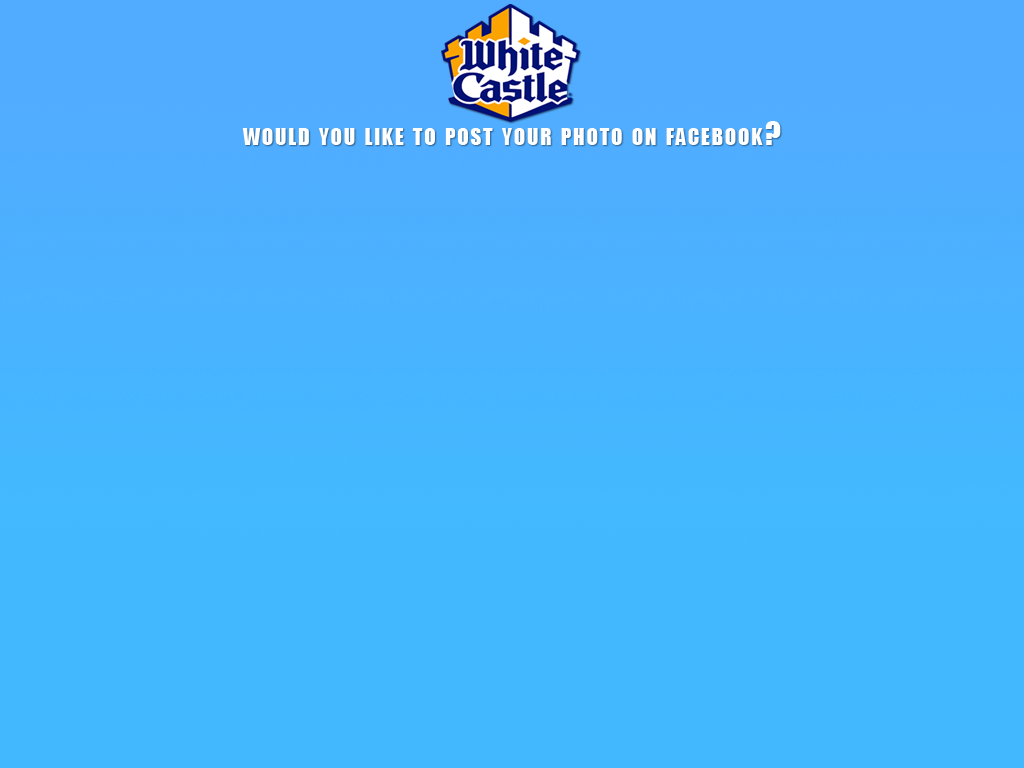
<style>
.page{position:relative;width:1024px;height:768px;background:#42b9ff}
.page>*{position:absolute;margin:0}
.t1{font:30px "Impact";letter-spacing:0.07em;color:#ffffff;font-variant:small-caps}
</style>
<div class="page">
<p class="t1" style="left:242px;top:121px;width:539px;height:24px">would you like to post your photo on facebook?</p>
</div>
